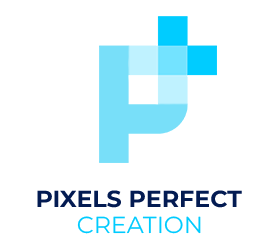
<style>
.page{position:relative;width:279px;height:249px;background:#ffffff}
.page>*{position:absolute;margin:0}
.t1{font:23.2px "Montserrat-Bold";color:#031b52}
.t2{font:23.2px "Montserrat-Regular";color:#00cbff}
</style>
<div class="page">
<p class="t1" style="left:37px;top:190px;width:205px;height:18px">PIXELS PERFECT</p>
<p class="t2" style="left:77px;top:216px;width:124px;height:18px">CREATION</p>
</div>
